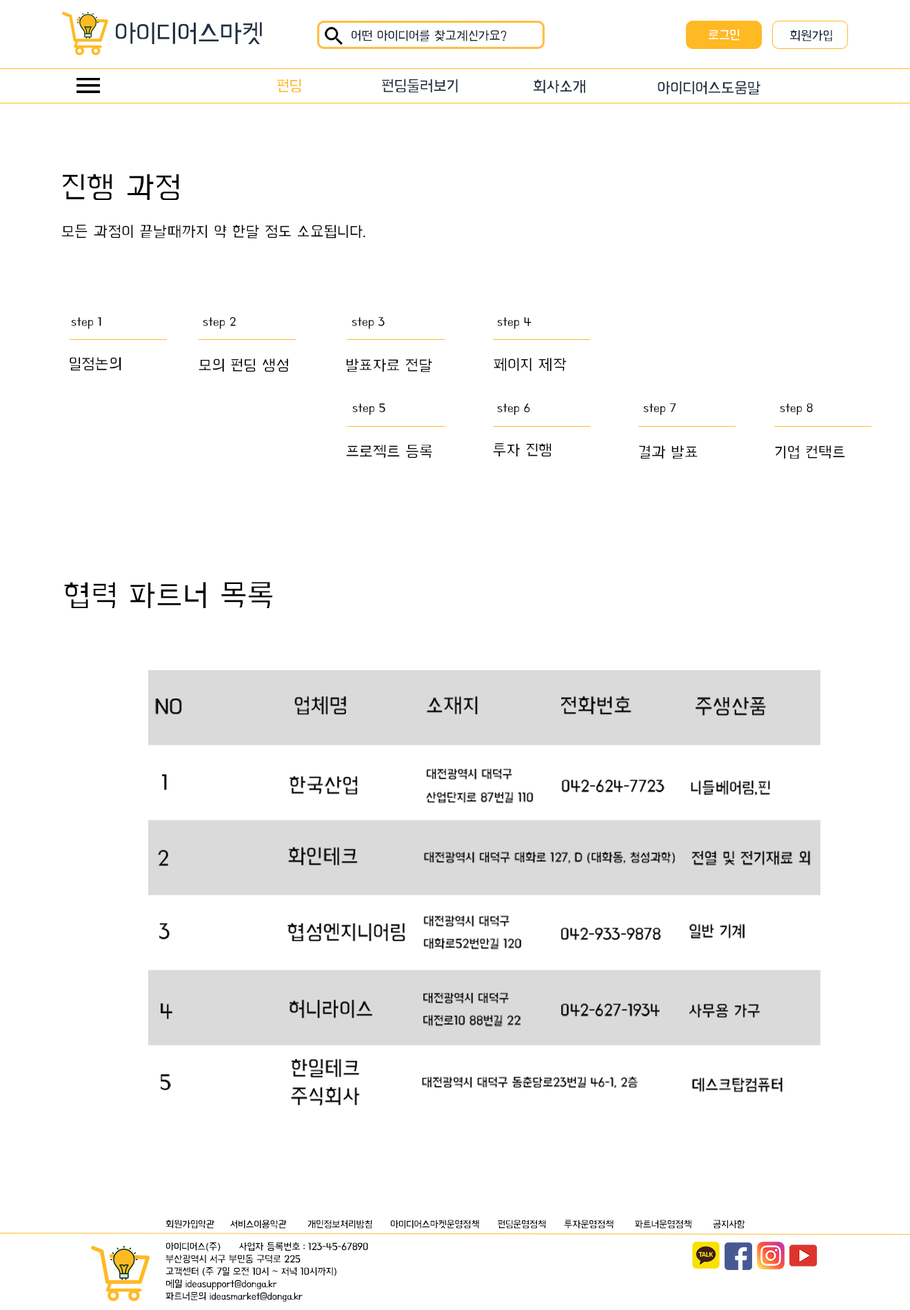
<style>
.page{position:relative;width:910px;height:1310px;background:#ffffff}
.page>*{position:absolute;margin:0}
.t1{font:27.6px "BMHANNAAir";letter-spacing:-0.03em;color:#233041}
.t2{font:13.8px "BMHANNAAir";letter-spacing:-0.02em;color:#202d3e}
.t3{font:13.8px "BMHANNAAir";letter-spacing:-0.02em;color:#ffffff}
.t4{font:16.5px "BMHANNAAir";letter-spacing:-0.02em;color:#ffb923}
.t5{font:16.5px "BMHANNAAir";letter-spacing:-0.02em;color:#202d3e}
.t6{font:33.1px "BMHANNAAir";color:#000000}
.t7{font:16.5px "BMHANNAAir";color:#000000}
.t8{font:12.4px "BMHANNAAir";color:#000000}
.t9{font:22.5px "BMHANNAAir";color:#000000;scale:0.96 1}
.t10{font:13.1px "BMHANNAAir";color:#000000;scale:0.96 1}
.t11{font:16.9px "BMHANNAAir";color:#000000;scale:0.96 1}
.t12{font:22.5px/28.1px "BMHANNAAir";color:#000000;scale:0.96 1}
.t13{font:10.3px "BMHANNAAir";letter-spacing:-0.025em;color:#000000}
.t14{font:10.3px "BMHANNAAir";letter-spacing:-0.02em;color:#000000}
</style>
<div class="page">
<p class="t1" style="left:116px;top:22px;width:146px;height:22px">아이디어스마켓</p>
<p class="t2" style="left:352px;top:30px;width:155px;height:11px">어떤 아이디어를 찾고계신가요?</p>
<p class="t3" style="left:709px;top:29px;width:30px;height:12px">로그인</p>
<p class="t2" style="left:790px;top:30px;width:42px;height:11px">회원가입</p>
<p class="t4" style="left:277px;top:79px;width:24px;height:13px">펀딩</p>
<p class="t5" style="left:382px;top:79px;width:76px;height:13px">펀딩둘러보기</p>
<p class="t5" style="left:534px;top:79px;width:51px;height:14px">회사소개</p>
<p class="t5" style="left:658px;top:81px;width:103px;height:13px">아이디어스도움말</p>
<p class="t6" style="left:63px;top:174px;width:116px;height:26px">진행 과정</p>
<p class="t7" style="left:61px;top:224px;width:304px;height:15px">모든 과정이 끝날때까지 약 한달 정도 소요됩니다.</p>
<p class="t8" style="left:71px;top:317px;width:30px;height:12px">step 1</p>
<p class="t8" style="left:203px;top:316px;width:33px;height:13px">step 2</p>
<p class="t8" style="left:352px;top:317px;width:33px;height:12px">step 3</p>
<p class="t8" style="left:497px;top:317px;width:35px;height:12px">step 4</p>
<p class="t7" style="left:70px;top:357px;width:51px;height:14px">일정논의</p>
<p class="t7" style="left:199px;top:359px;width:89px;height:13px">모의 펀딩 생성</p>
<p class="t7" style="left:346px;top:359px;width:86px;height:13px">발표자료 전달</p>
<p class="t7" style="left:494px;top:358px;width:73px;height:14px">페이지 제작</p>
<p class="t8" style="left:352px;top:403px;width:33px;height:12px">step 5</p>
<p class="t8" style="left:497px;top:403px;width:33px;height:12px">step 6</p>
<p class="t8" style="left:643px;top:403px;width:33px;height:12px">step 7</p>
<p class="t8" style="left:780px;top:403px;width:33px;height:12px">step 8</p>
<p class="t7" style="left:346px;top:445px;width:86px;height:14px">프로젝트 등록</p>
<p class="t7" style="left:493px;top:443px;width:59px;height:14px">투자 진행</p>
<p class="t7" style="left:639px;top:445px;width:59px;height:14px">결과 발표</p>
<p class="t7" style="left:775px;top:445px;width:70px;height:14px">기업 컨택트</p>
<p class="t6" style="left:64px;top:582px;width:208px;height:26px"><span class="t7"> </span>협력 파트너 목록</p>
<p class="t9" style="left:155px;top:698px;width:27px;height:16px">NO</p>
<p class="t9" style="left:294px;top:696px;width:52px;height:19px">업체명</p>
<p class="t9" style="left:427px;top:696px;width:51px;height:19px">소재지</p>
<p class="t9" style="left:561px;top:696px;width:71px;height:19px">전화번호</p>
<p class="t9" style="left:696px;top:697px;width:70px;height:19px">주생산품</p>
<p class="t10" style="left:426px;top:769px;width:108px;height:34px">대전광역시 대덕구 <br>산업단지로 87번길 110</p>
<p class="t9" style="left:162px;top:774px;width:5px;height:16px">1</p>
<p class="t9" style="left:289px;top:776px;width:69px;height:19px">한국산업</p>
<p class="t11" style="left:561px;top:779px;width:104px;height:13px">042-624-7723</p>
<p class="t11" style="left:691px;top:781px;width:79px;height:15px">니들베어링,핀</p>
<p class="t9" style="left:158px;top:850px;width:11px;height:16px">2</p>
<p class="t9" style="left:288px;top:847px;width:70px;height:19px">화인테크</p>
<p class="t10" style="left:424px;top:851px;width:251px;height:13px">대전광역시 대덕구 대화로 127, D (대화동, 청성과학)</p>
<p class="t11" style="left:692px;top:851px;width:119px;height:14px">전열 및 전기재료 외</p>
<p class="t10" style="left:423px;top:916px;width:98px;height:33px">대전광역시 대덕구 <br>대화로52번안길 120</p>
<p class="t9" style="left:159px;top:923px;width:11px;height:17px">3</p>
<p class="t9" style="left:288px;top:923px;width:117px;height:19px">협성엔지니어링</p>
<p class="t11" style="left:561px;top:927px;width:100px;height:13px">042-933-9878</p>
<p class="t11" style="left:690px;top:924px;width:55px;height:14px">일반 기계</p>
<p class="t9" style="left:290px;top:1000px;width:82px;height:19px">허니라이스</p>
<p class="t10" style="left:423px;top:993px;width:98px;height:34px">대전광역시 대덕구 <br>대전로10 88번길 22</p>
<p class="t9" style="left:161px;top:1003px;width:11px;height:16px">4</p>
<p class="t11" style="left:561px;top:1003px;width:99px;height:13px">042-627-1934</p>
<p class="t11" style="left:690px;top:1004px;width:71px;height:14px">사무용 가구</p>
<p class="t12" style="left:291px;top:1059px;width:69px;height:47px">한일테크<br>주식회사</p>
<p class="t9" style="left:160px;top:1074px;width:11px;height:17px">5</p>
<p class="t10" style="left:422px;top:1076px;width:216px;height:12px">대전광역시 대덕구 동춘당로23번길 46-1, 2층</p>
<p class="t11" style="left:692px;top:1078px;width:91px;height:14px">데스크탑컴퓨터</p>
<p class="t13" style="left:165px;top:1220px;width:580px;height:9px">회원가입약관       서비스이용약관       개인정보처리방침      아이디어스마켓운영정책      펀딩운영정책      투자운영정책       파트너운영정책       공지사항</p>
<p class="t14" style="left:165px;top:1242px;width:203px;height:60px">아이디어스(주)      사업자 등록번호 : 123-45-67890  <br>부산광역시 서구 부민동 구덕로 225<br>고객센터 (주 7일 오전 10시 ~ 저녁 10시까지)<br>메일 ideasupport@donga.kr<br>파트너문의 ideasmarket@donga.kr</p>
</div>
